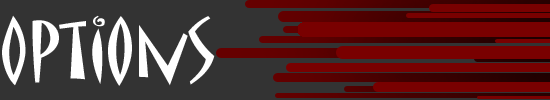
<style>
.page{position:relative;width:550px;height:100px;background:#333333}
.page>*{position:absolute;margin:0}
.t1{font:74.7px "MatisseITC-Regular";color:#ffffff}
</style>
<div class="page">
<p class="t1" style="left:2px;top:15px;width:213px;height:71px">Options</p>
</div>
